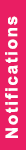
<style>
.page{position:relative;width:26px;height:150px;background:#e91e63}
.page>*{position:absolute;margin:0}
.t1{font:17px "Arial-BoldMT";letter-spacing:0.1em;color:#ffffff}
</style>
<div class="page">
<p class="t1" style="left:5px;top:16px;width:13px;height:122px;rotate:-90deg">Notifications</p>
</div>
